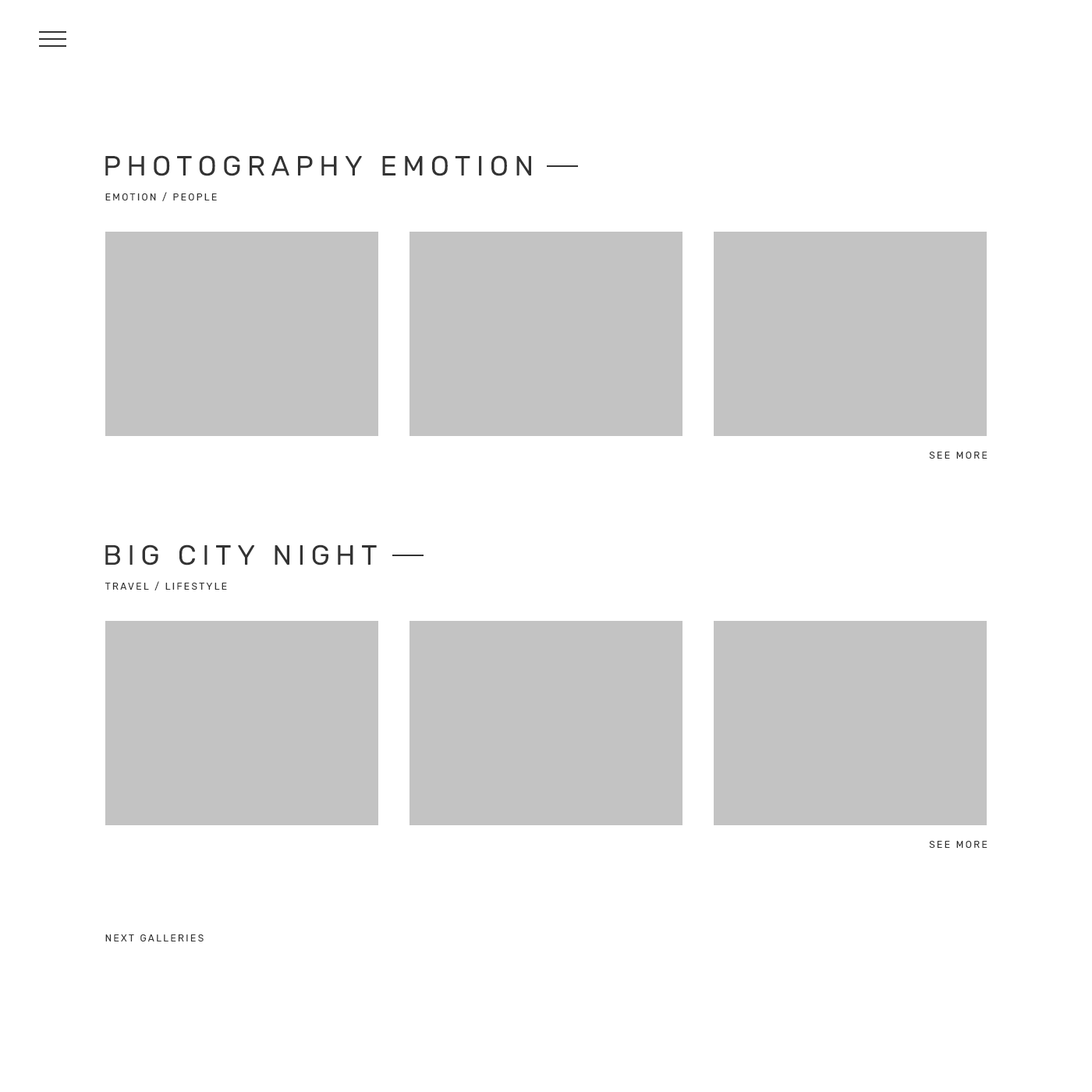
<style>
.page{position:relative;width:1092px;height:1092px;background:#ffffff}
.page>*{position:absolute;margin:0}
.t1{font:28.1px "Rubik-Regular";letter-spacing:0.2em;color:#333333;text-transform:uppercase}
.t2{font:9.4px "Rubik-Regular";letter-spacing:0.2em;color:#333333;text-transform:uppercase}
</style>
<div class="page">
<p class="t1" style="left:105px;top:155px;width:426px;height:21px">Photography Emotion</p>
<p class="t2" style="left:105px;top:192px;width:112px;height:9px">Emotion / People</p>
<p class="t2" style="left:929px;top:452px;width:58px;height:7px">SEE MORE</p>
<p class="t1" style="left:105px;top:544px;width:272px;height:21px">Big City Night</p>
<p class="t2" style="left:105px;top:581px;width:122px;height:9px">Travel / Lifestyle</p>
<p class="t2" style="left:929px;top:841px;width:58px;height:7px">SEE MORE</p>
<p class="t2" style="left:105px;top:934px;width:99px;height:7px">Next Galleries</p>
</div>
